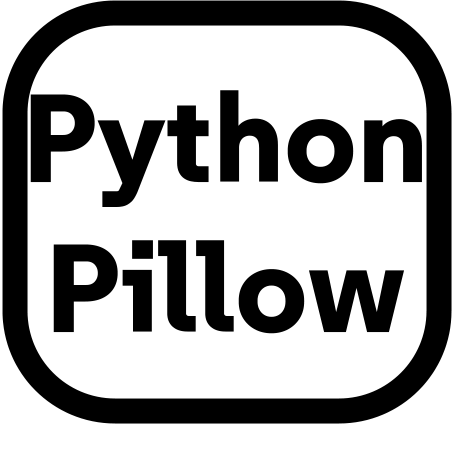
<style>
.page{position:relative;width:454px;height:454px;background:#ffffff}
.page>*{position:absolute;margin:0}
.t1{font:125px "SUSE-ExtraBold";color:#000000}
</style>
<div class="page">
<p class="t1" style="left:30px;top:90px;width:392px;height:244px;text-align:center">Python<br>Pillow</p>
</div>
